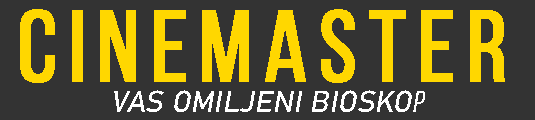
<style>
.page{position:relative;width:535px;height:120px;background:#333333}
.page>*{position:absolute;margin:0}
.t1{font:100.1px "BebasNeueRegular";letter-spacing:0.1em;color:#ffd700;font-weight:bold}
.t2{font:30.2px "Bahnschrift";color:#ffffff;font-style:italic}
.t3{font:30.2px "BebasNeueRegular";color:#ffffff;font-style:italic}
</style>
<div class="page">
<p class="t1" style="left:20px;top:9px;width:485px;height:74px">CINEMASTER</p>
<p class="t2" style="left:114px;top:90px;width:311px;height:22px">VAS OMILJENI BIOSKO<span class="t3">P</span></p>
</div>
